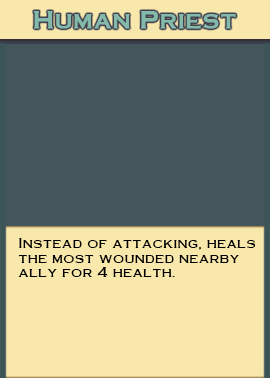
<style>
.page{position:relative;width:270px;height:378px;background:#44555b}
.page>*{position:absolute;margin:0}
.t1{font:21px "OCopperplate-Plain";color:#84baaa;font-weight:bold}
.t2{font:12px "OCopperplate-Plain";color:#000000}
</style>
<div class="page">
<p class="t1" style="left:33px;top:11px;width:203px;height:18px">Human Priest</p>
<p class="t2" style="left:18px;top:238px;width:238px;height:39px">Instead of attacking, heals the most wounded nearby ally for 4 health.</p>
</div>
